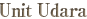
<style>
.page{position:relative;width:87px;height:19px;background:#ffffff}
.page>*{position:absolute;margin:0}
.t1{font:18px "RyuminPro-ExBold";letter-spacing:-0.04em}
</style>
<div class="page">
<p class="t1" style="left:0px;top:3px;width:87px;height:14px">Unit Udara</p>
</div>
